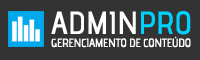
<style>
.page{position:relative;width:200px;height:60px;background:#333333}
.page>*{position:absolute;margin:0}
.t1{font:32px "advent-Bd2";letter-spacing:0.007em;color:#ffffff}
.t2{font:32px "advent-Bd2";letter-spacing:0.007em;color:#00d2ff}
.t3{font:12px "advent-Bd2";letter-spacing:-0.03em;color:#ffffff}
</style>
<div class="page">
<p class="t1" style="left:51px;top:11px;width:140px;height:24px">ADMIN<span class="t2">PRO</span></p>
<p class="t3" style="left:51px;top:36px;width:140px;height:12px">GERENCIAMENTO DE CONTEÚDO</p>
</div>
